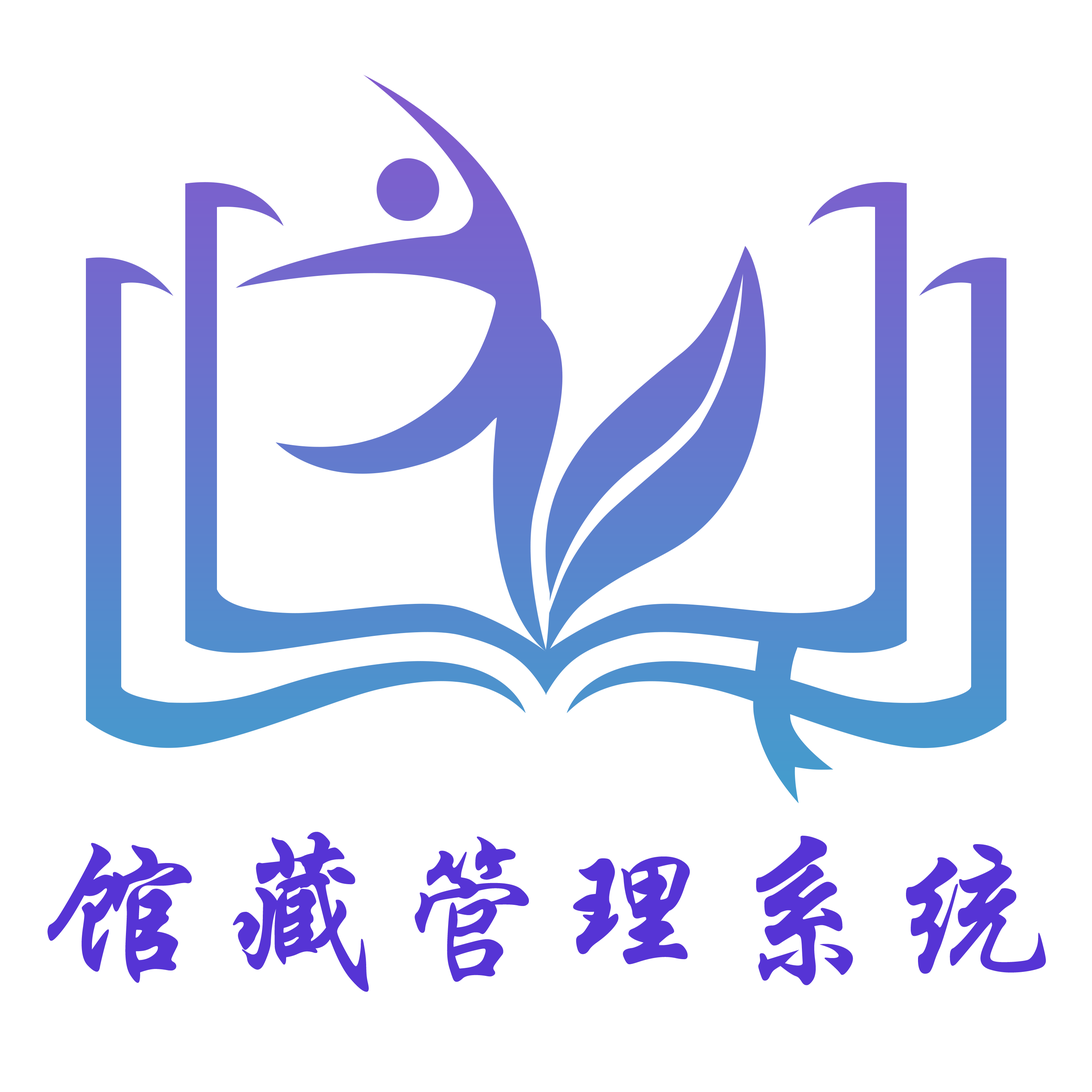
<style>
.page{position:relative;width:1092px;height:1092px;background:#ffffff}
.page>*{position:absolute;margin:0}
.t1{font:168.8px "STXingkai";color:#5634d5}
</style>
<div class="page">
<p class="t1" style="left:47px;top:832px;width:999px;height:160px">馆藏管理系统</p>
</div>
